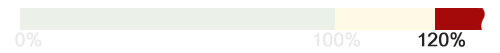
<style>
.page{position:relative;width:500px;height:53px;background:#ffffff}
.page>*{position:absolute;margin:0}
.t1{font:18.7px "ArialUnicodeMS";color:#e9e9e9;font-weight:bold}
.t2{font:18.7px "ArialUnicodeMS";color:#232323;font-weight:bold}
</style>
<div class="page">
<p class="t1" style="left:15px;top:32px;width:27px;height:15px">0%</p>
<p class="t1" style="left:313px;top:32px;width:47px;height:15px">100%</p>
<p class="t2" style="left:418px;top:32px;width:47px;height:15px">120%</p>
</div>
